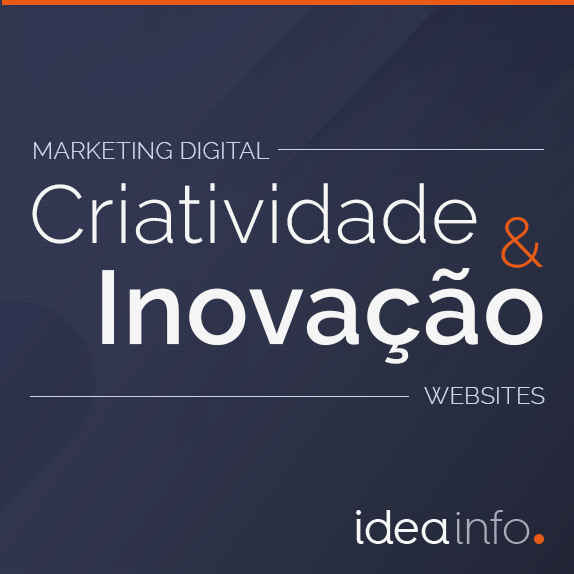
<style>
.page{position:relative;width:574px;height:574px}
.page>*{position:absolute;margin:0}
.t1{font:24px "Raleway-Light";letter-spacing:0.01em;color:#cdd3e9}
.t2{font:82px "Raleway-Light";letter-spacing:0.01em;color:#f5f5f5}
.t3{font:69.5px "Raleway-Light";letter-spacing:0.01em;color:#e75b14}
.t4{font:104.2px "Raleway-SemiBold";letter-spacing:0.01em;color:#f5f5f5}
</style>
<div class="page">
<p class="t1" style="left:34px;top:142px;width:236px;height:17px">MARKETING DIGITAL</p>
<p class="t2" style="left:32px;top:183px;width:445px;height:61px">Criatividade</p>
<p class="t3" style="left:501px;top:217px;width:42px;height:51px">&amp;</p>
<p class="t4" style="left:102px;top:268px;width:441px;height:96px">Inovação</p>
<p class="t1" style="left:424px;top:387px;width:121px;height:17px">WEBSITES</p>
</div>
